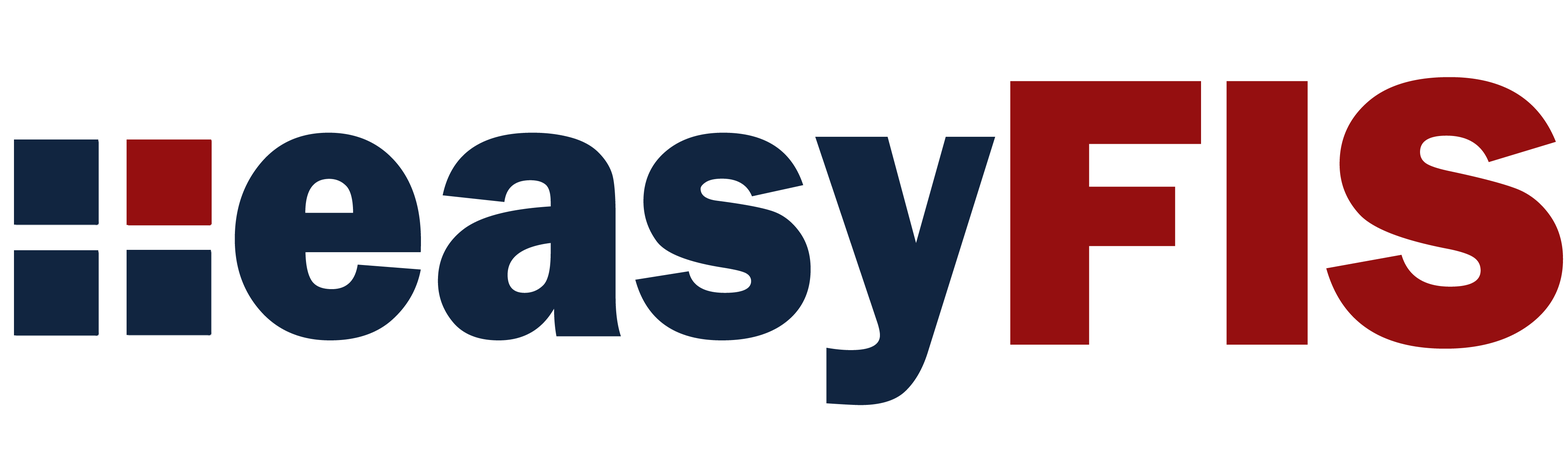
<style>
.page{position:relative;width:1568px;height:476px;background:#ffffff}
.page>*{position:absolute;margin:0}
.t1{font:394.9px "FranklinGothic-Heavy";color:#950f10}
.t2{font:401.2px "FranklinGothic-Heavy";color:#112540;scale:0.86 1}
</style>
<div class="page">
<p class="t1" style="left:1010px;top:77px;width:553px;height:272px">FIS</p>
<p class="t2" style="left:235px;top:132px;width:760px;height:273px">easy</p>
</div>
